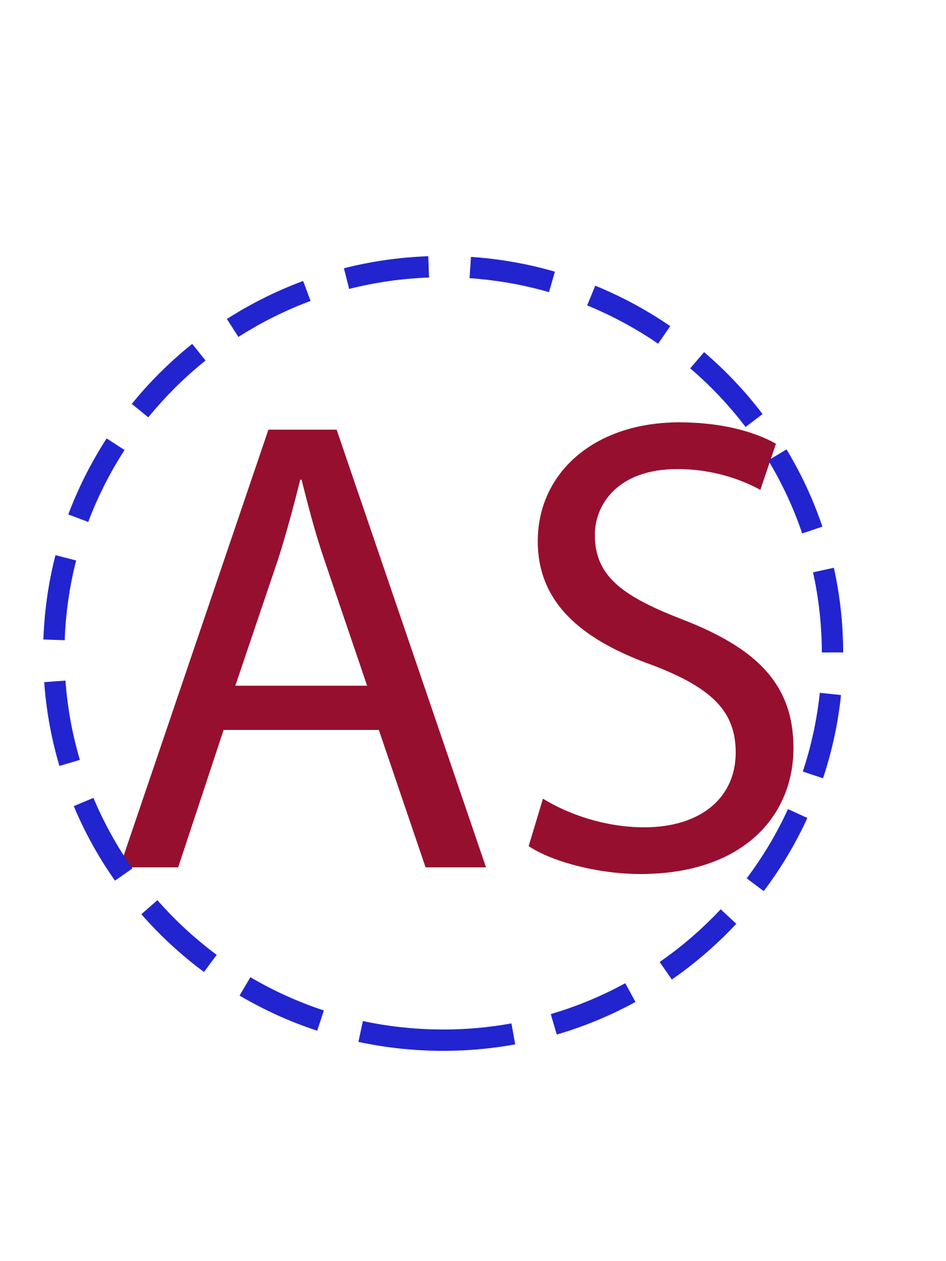
<style>
.page{position:relative;width:946px;height:1261px;background:#ffffff}
.page>*{position:absolute;margin:0}
.t1{font:649.1px "MyriadPro-Regular";color:#960f2e}
</style>
<div class="page">
<p class="t1" style="left:119px;top:422px;width:674px;height:452px">AS</p>
</div>
